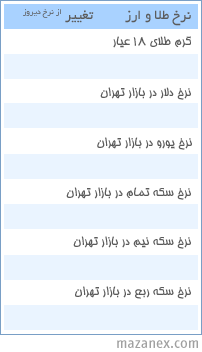
<style>
.page{position:relative;width:202px;height:352px;background:#ffffff}
.page>*{position:absolute;margin:0}
.t1{font:14.7px "BYekan";color:#5b5b5b}
.t2{font:13.3px "BHoma";color:#5b5b5b}
.t3{font:16px "InfoDispBook-Roman";color:#a0a0a0}
</style>
<div class="page">
<p class="t1" style="left:23px;top:9px;width:71px;height:14px">تغییر از نرخ دیروز</p>
<p class="t1" style="left:125px;top:10px;width:66px;height:16px">نرخ طلا و ارز</p>
<p class="t2" style="left:113px;top:36px;width:78px;height:12px">گرم طلای 18 عیار</p>
<p class="t2" style="left:100px;top:87px;width:91px;height:13px">نرخ دلار در بازار تهران</p>
<p class="t2" style="left:97px;top:137px;width:95px;height:13px">نرخ یورو در بازار تهران</p>
<p class="t2" style="left:66px;top:187px;width:125px;height:13px">نرخ سکه تمام در بازار تهران</p>
<p class="t2" style="left:73px;top:236px;width:118px;height:13px">نرخ سکه نیم در بازار تهران</p>
<p class="t2" style="left:75px;top:286px;width:116px;height:13px">نرخ سکه ربع در بازار تهران</p>
<p class="t3" style="left:117px;top:340px;width:81px;height:8px">mazanex.com</p>
</div>
